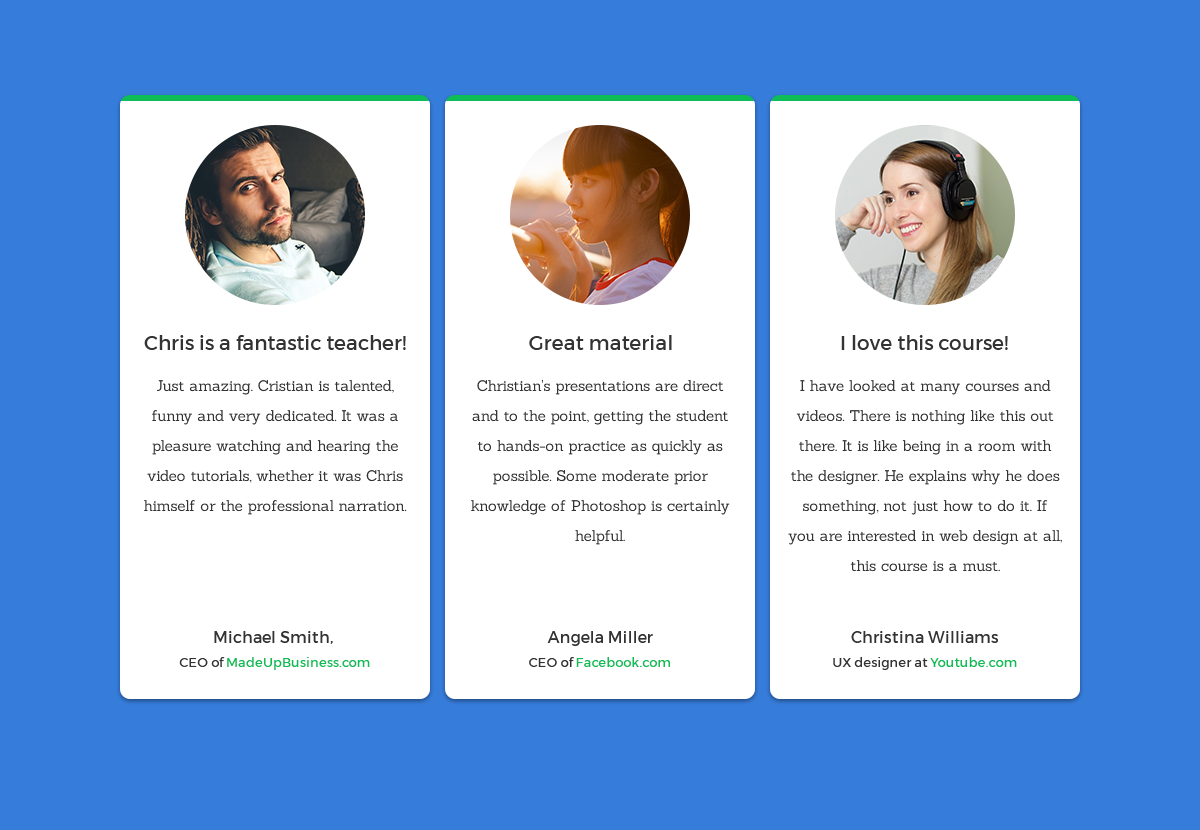
<style>
.page{position:relative;width:1200px;height:830px;background:#ffffff}
.page>*{position:absolute;margin:0}
.t1{font:20px "Montserrat-Regular";color:#333333}
.t2{font:15px/30px "Sanchez-Regular";color:#333333}
.t3{font:13px/24px "Montserrat-Regular";color:#0ebd58}
.t4{font:16px/24px "Montserrat-Regular";color:#333333}
.t5{font:13px/24px "Montserrat-Regular";color:#333333}
</style>
<div class="page">
<p class="t1" style="left:144px;top:335px;width:262px;height:15px">Chris is a fantastic teacher!</p>
<p class="t1" style="left:529px;top:335px;width:143px;height:15px">Great material</p>
<p class="t1" style="left:841px;top:335px;width:167px;height:15px">I love this course!</p>
<p class="t2" style="left:144px;top:380px;width:263px;height:135px;text-align:center">Just amazing. Cristian is talented, funny and very dedicated. It was a pleasure watching and hearing the video tutorials, whether it was Chris himself or the professional narration.</p>
<p class="t2" style="left:471px;top:379px;width:259px;height:166px;text-align:center">Christian's presentations are direct and to the point, getting the student to hands-on practice as quickly as possible. Some moderate prior knowledge of Photoshop is certainly helpful.</p>
<p class="t2" style="left:788px;top:380px;width:274px;height:192px;text-align:center">I have looked at many courses and videos. There is nothing like this out there. It is like being in a room with the designer. He explains why he does something, not just how to do it. If you are interested in web design at all, this course is a must.</p>
<p class="t3" style="left:179px;top:631px;width:191px;height:39px;text-align:center"><span class="t4">Michael Smith, <br></span><span class="t5">CEO of </span>MadeUpBusiness.com</p>
<p class="t4" style="left:529px;top:631px;width:141px;height:36px;text-align:center">Angela Miller<br><span class="t5">CEO of </span><span class="t3">Facebook.com</span></p>
<p class="t4" style="left:833px;top:631px;width:184px;height:39px;text-align:center">Christina Williams<br><span class="t5">UX designer at </span><span class="t3">Youtube.com</span></p>
</div>
